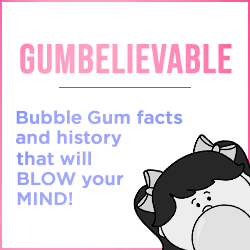
<style>
.page{position:relative;width:250px;height:250px;background:#ffffff}
.page>*{position:absolute;margin:0}
.t1{font:41px "BebasNeue-Regular";color:#ff97c0;font-weight:bold}
.t2{font:18px/20px "iCielGotham-Medium";color:#9ca3ff;font-weight:bold}
.t3{font:18px/20px "iCielGotham-Medium";color:#9fa6ff;font-weight:bold}
</style>
<div class="page">
<p class="t1" style="left:20px;top:43px;width:212px;height:31px">gumbelievable</p>
<p class="t2" style="left:16px;top:110px;width:167px;height:37px">Bubble Gum facts<br>and history</p>
<p class="t3" style="left:16px;top:151px;width:108px;height:54px">that will BLOW your MIND!</p>
</div>
